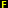
<style>
.page{position:relative;width:8px;height:8px;background:#000000}
.page>*{position:absolute;margin:0}
.t1{font:11px "Consolas-Bold";color:#f0ff00}
</style>
<div class="page">
<p class="t1" style="left:1px;top:1px;width:6px;height:7px">F</p>
</div>
